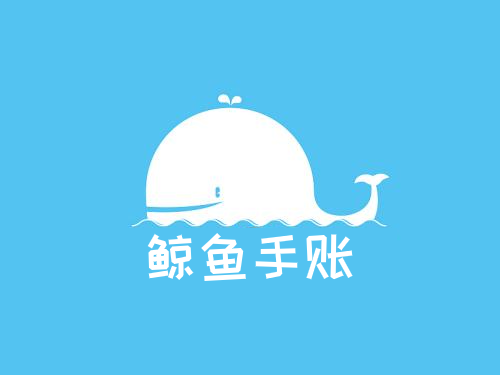
<style>
.page{position:relative;width:500px;height:375px;background:#53c3f1}
.page>*{position:absolute;margin:0}
.t1{font:53px "HappyZcool-2016";color:#ffffff}
</style>
<div class="page">
<p class="t1" style="left:147px;top:232px;width:206px;height:50px">鲸鱼手账</p>
</div>
